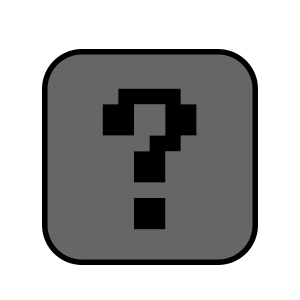
<style>
.page{position:relative;width:300px;height:300px;background:#ffffff}
.page>*{position:absolute;margin:0}
.t1{font:250px "Fixedsys";color:#000000}
</style>
<div class="page">
<p class="t1" style="left:102px;top:88px;width:95px;height:142px">?</p>
</div>
